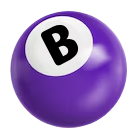
<style>
.page{position:relative;width:137px;height:139px;background:#ffffff}
.page>*{position:absolute;margin:0}
.t1{font:54.5px "Dangrek-Regular";color:#000000;font-weight:bold;scale:1.09 1}
</style>
<div class="page">
<p class="t1" style="left:40px;top:24px;width:39px;height:42px;rotate:-28deg">B</p>
</div>
